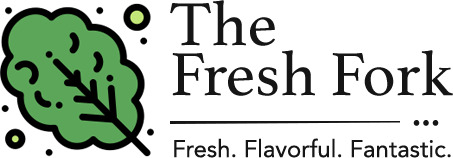
<style>
.page{position:relative;width:453px;height:158px;background:#ffffff}
.page>*{position:absolute;margin:0}
.t1{font:64px/50px "Athelas-Regular";color:#151515}
.t2{font:44px "Athelas-Regular";color:#151515}
.t3{font:24px "Avenir-Roman";color:#151515}
</style>
<div class="page">
<p class="t1" style="left:170px;top:0px;width:283px;height:96px">The <br>Fresh Fork</p>
<p class="t2" style="left:413px;top:120px;width:26px;height:6px">...</p>
<p class="t3" style="left:174px;top:138px;width:277px;height:20px">Fresh. Flavorful. Fantastic.</p>
</div>
